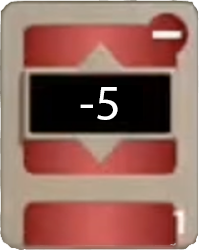
<style>
.page{position:relative;width:199px;height:250px}
.page>*{position:absolute;margin:0}
.t1{font:50px "MyriadPro-Regular";color:#ffffff}
</style>
<div class="page">
<p class="t1" style="left:80px;top:87px;width:38px;height:33px">-5</p>
</div>
